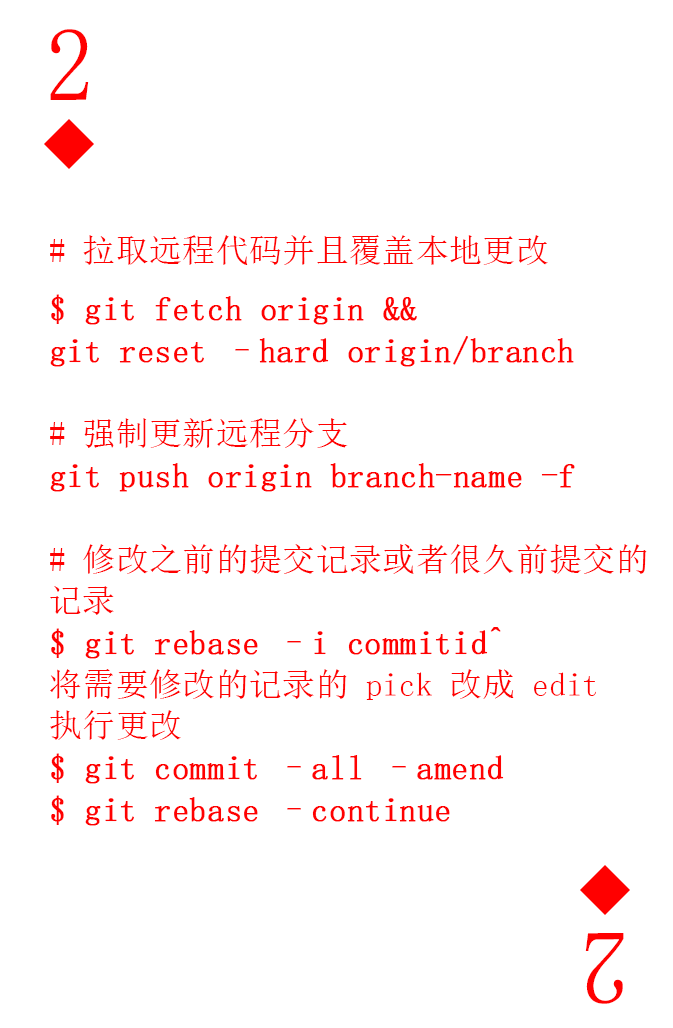
<style>
.page{position:relative;width:673px;height:1028px;background:#ffffff}
.page>*{position:absolute;margin:0}
.t1{font:104.2px "SimSun-ExtB";color:#ff0101;scale:0.93 1}
.t2{font:33.3px/41.7px "SimSun";color:#ff0101;font-weight:bold}
.t3{font:33.3px "SimSun";color:#ff0101}
.t4{font:33.3px/41.7px "SimSun";color:#ff0101}
</style>
<div class="page">
<p class="t1" style="left:50px;top:29px;width:39px;height:71px">2</p>
<p class="t2" style="left:50px;top:235px;width:597px;height:591px"><span class="t3"># 拉取远程代码并且覆盖本地更改<br></span>$ git fetch origin &amp;&amp; <br>git reset –hard origin/branch<br><br><span class="t4"># 强制更新远程分支<br></span>git push origin branch-name -f<br><span class="t4"><br># 修改之前的提交记录或者很久前提交的<br>记录<br></span>$ git rebase –i commitid^<br><span class="t4">将需要修改的记录的 pick 改成 edit<br>执行更改<br></span>$ git commit –all –amend<br>$ git rebase –continue</p>
<p class="t1" style="left:585px;top:933px;width:39px;height:71px;rotate:180deg">2</p>
</div>
